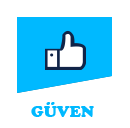
<style>
.page{position:relative;width:130px;height:128px;background:#ffffff}
.page>*{position:absolute;margin:0}
.t1{font:16px "CooperBlack";color:#00b9ff}
</style>
<div class="page">
<p class="t1" style="left:31px;top:102px;width:63px;height:15px">GÜVEN</p>
</div>
